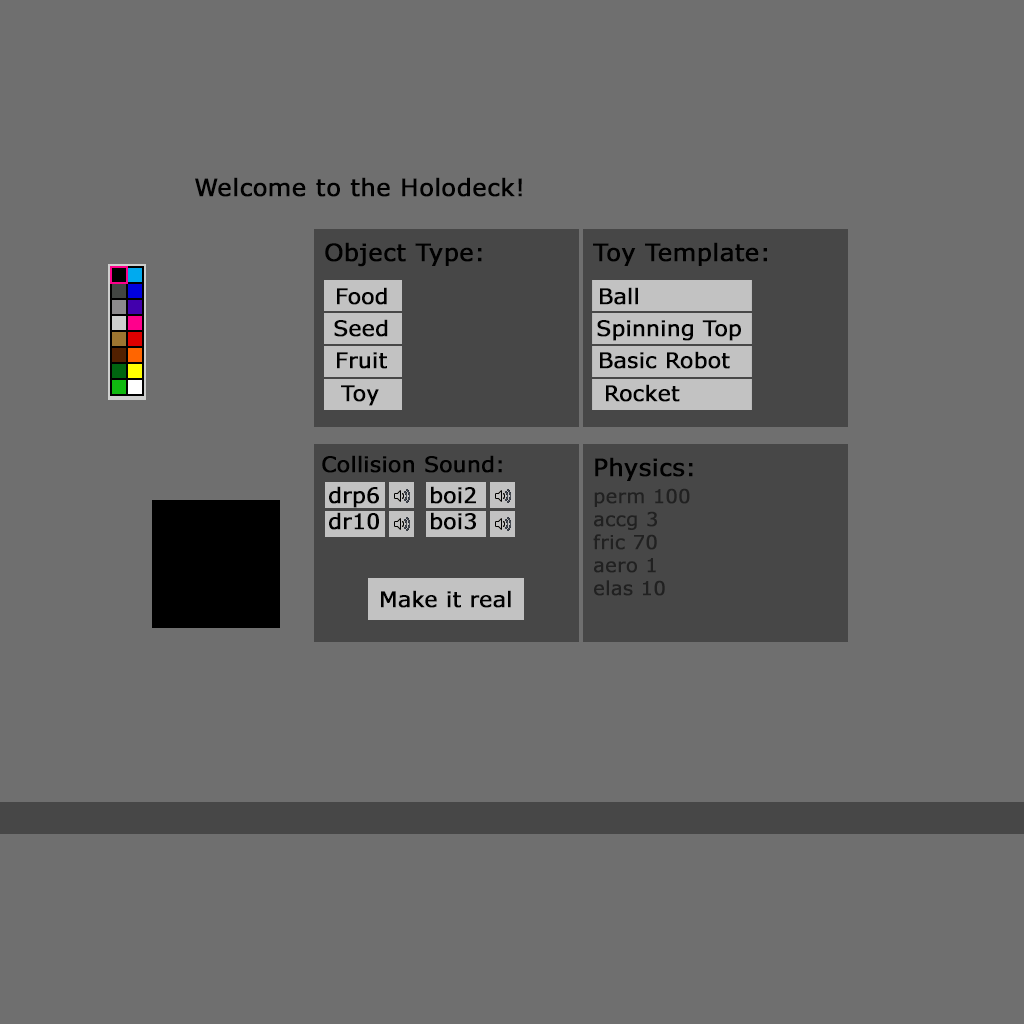
<style>
.page{position:relative;width:1024px;height:1024px;background:#6f6f6f}
.page>*{position:absolute;margin:0}
.t1{font:24px "Verdana";color:#000000;font-weight:bold}
.t2{font:21.5px "Verdana";color:#000000;font-weight:bold}
.t3{font:19.2px "Verdana";color:#212121;font-weight:bold}
</style>
<div class="page">
<p class="t1" style="left:195px;top:177px;width:327px;height:20px">Welcome to the Holodeck!</p>
<p class="t1" style="left:325px;top:242px;width:157px;height:25px">Object Type:</p>
<p class="t1" style="left:593px;top:242px;width:174px;height:24px">Toy Template:</p>
<p class="t2" style="left:337px;top:287px;width:50px;height:18px">Food</p>
<p class="t2" style="left:600px;top:287px;width:38px;height:18px">Ball</p>
<p class="t2" style="left:334px;top:319px;width:54px;height:18px">Seed</p>
<p class="t2" style="left:597px;top:320px;width:144px;height:21px">Spinning Top</p>
<p class="t2" style="left:337px;top:352px;width:50px;height:17px">Fruit</p>
<p class="t2" style="left:600px;top:351px;width:130px;height:18px">Basic Robot</p>
<p class="t2" style="left:341px;top:385px;width:38px;height:21px">Toy</p>
<p class="t2" style="left:606px;top:384px;width:74px;height:18px">Rocket</p>
<p class="t2" style="left:322px;top:455px;width:180px;height:18px">Collision Sound:</p>
<p class="t1" style="left:595px;top:457px;width:98px;height:24px">Physics:</p>
<p class="t2" style="left:329px;top:486px;width:50px;height:44px">drp6<br>dr10</p>
<p class="t2" style="left:431px;top:486px;width:45px;height:44px">boi2<br>boi3</p>
<p class="t3" style="left:593px;top:488px;width:97px;height:108px">perm 100<br>accg 3<br>fric 70<br>aero 1<br>elas 10</p>
<p class="t2" style="left:381px;top:590px;width:130px;height:18px">Make it real</p>
</div>
